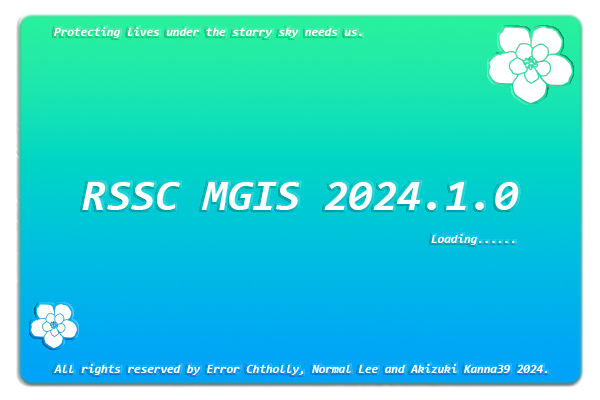
<style>
.page{position:relative;width:600px;height:400px}
.page>*{position:absolute;margin:0}
.t1{font:12px "Consolas-BoldItalic";color:#ffffff}
.t2{font:44px "Consolas-BoldItalic";color:#ffffff}
</style>
<div class="page">
<p class="t1" style="left:54px;top:27px;width:308px;height:11px">Protecting lives under the starry sky needs us.</p>
<p class="t2" style="left:82px;top:182px;width:437px;height:28px">RSSC MGIS 2024.1.0</p>
<p class="t1" style="left:431px;top:234px;width:84px;height:11px">Loading......</p>
<p class="t1" style="left:54px;top:364px;width:493px;height:11px">All rights reserved by Error Chtholly, Normal Lee and Akizuki Kanna39 2024.</p>
</div>
